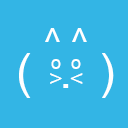
<style>
.page{position:relative;width:128px;height:128px;background:#33b5e5}
.page>*{position:absolute;margin:0}
.t1{font:36px "ArialMT";color:#ffffff}
.t2{font:48px "ArialMT";color:#ffffff}
.t3{font:18px "ArialMT";color:#ffffff}
.t4{font:24px "ArialMT";color:#ffffff}
</style>
<div class="page">
<p class="t1" style="left:45px;top:28px;width:42px;height:14px">^ ^</p>
<p class="t2" style="left:19px;top:53px;width:95px;height:45px">(  .  )</p>
<p class="t3" style="left:51px;top:59px;width:30px;height:10px">o  o</p>
<p class="t4" style="left:50px;top:73px;width:33px;height:11px">&gt; &lt;</p>
</div>
